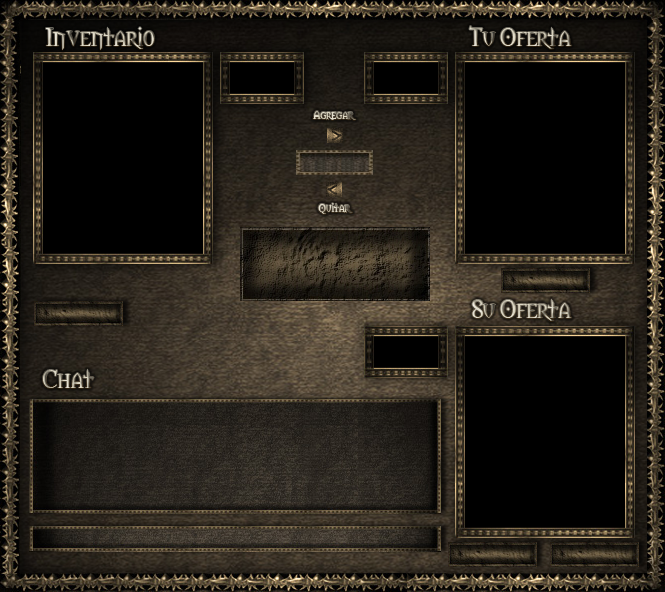
<style>
.page{position:relative;width:665px;height:592px;background:#000000}
.page>*{position:absolute;margin:0}
.t1{font:24px "Morpheus"}
.t2{font:11px "Morpheus";color:#dbd6c2}
.t3{font:11px "Morpheus"}
</style>
<div class="page">
<p class="t1" style="left:46px;top:27px;width:109px;height:23px">Inventari0o</p>
<p class="t1" style="left:469px;top:26px;width:103px;height:23px">Tu Oferta</p>
<p class="t2" style="left:313px;top:111px;width:43px;height:9px">Agregar</p>
<p class="t3" style="left:318px;top:203px;width:35px;height:11px">Quitar</p>
<p class="t1" style="left:472px;top:299px;width:100px;height:22px">Su Oferta</p>
<p class="t1" style="left:43px;top:369px;width:51px;height:19px">Chat</p>
</div>
